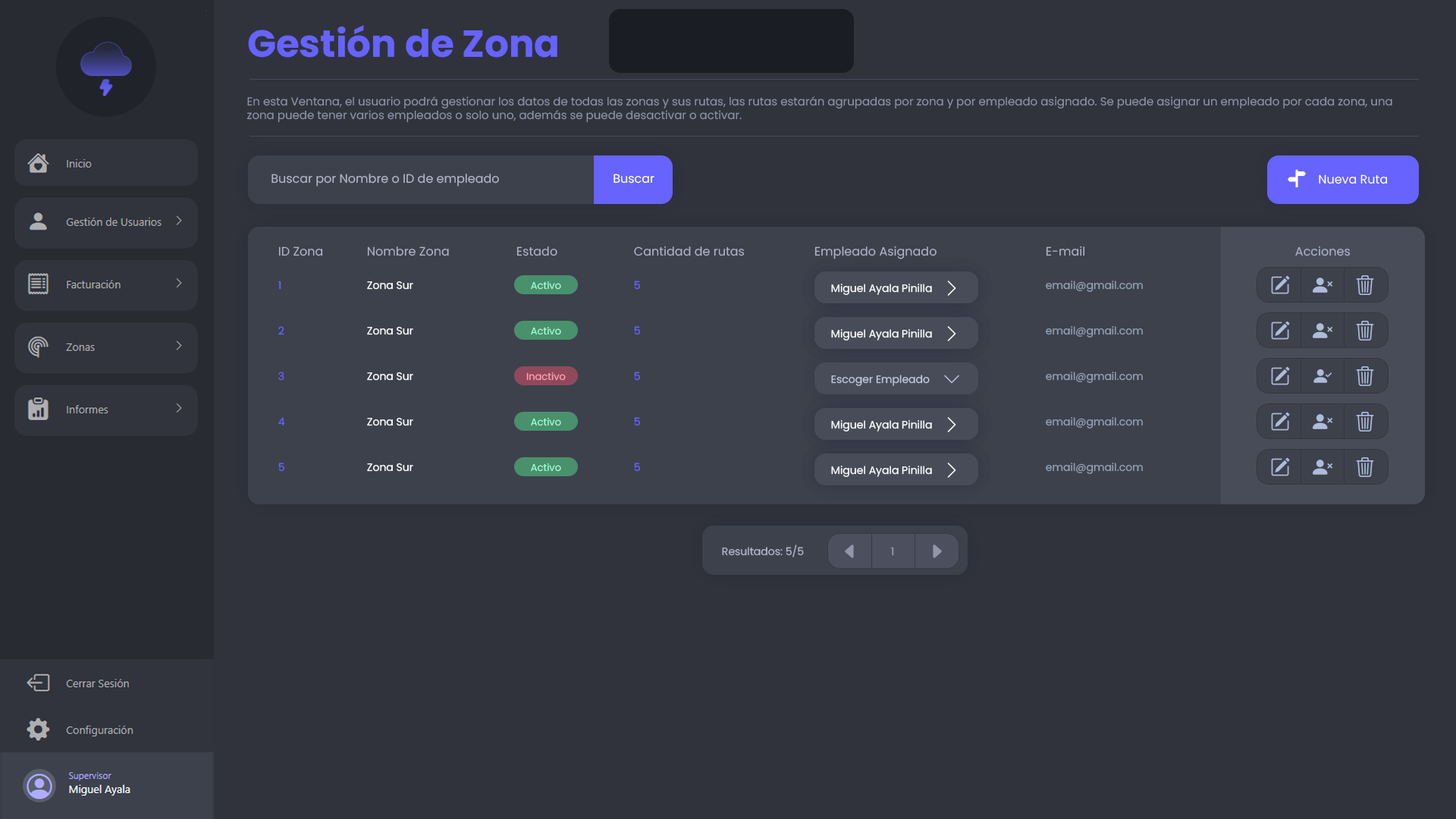
<style>
.page{position:relative;width:1456px;height:819px;background:#30333c}
.page>*{position:absolute;margin:0}
.t1{font:37.9px "Poppins-Bold";color:#6663fe}
.t2{font:11.4px "Poppins-Regular";color:#8c92a6}
.t3{font:12.1px "Poppins-Regular";color:#aeb5c8}
.t4{font:12.1px "Poppins-Regular";color:#ffffff}
.t5{font:12.1px "Poppins-Regular";color:#bcc9db}
.t6{font:10.6px "Poppins-Regular";color:#6663fe}
.t7{font:10.6px "Poppins-Regular";color:#ffffff}
.t8{font:9.9px "Poppins-Regular";color:#9fffcf}
.t9{font:10.6px "Poppins-Regular";color:#92a0b4}
.t10{font:9.9px "Poppins-Regular";color:#ff9fb3}
.t11{font:10.6px "Poppins-Regular";color:#bcc9db}
.t12{font:10.6px "Poppins-Regular";color:#aeb5c8}
.t13{font:10.6px "Poppins-Regular";color:#959bac}
</style>
<div class="page">
<p class="t1" style="left:248px;top:25px;width:309px;height:33px">Gestión de Zona</p>
<p class="t2" style="left:246px;top:96px;width:1146px;height:27px">En esta Ventana, el usuario podrá gestionar los datos de todas las zonas y sus rutas, las rutas estarán agrupadas por zona y por empleado asignado. Se puede asignar un empleado por cada zona, una <br>zona puede tener varios empleados o solo uno, además se puede desactivar o activar.</p>
<p class="t3" style="left:271px;top:174px;width:228px;height:13px">Buscar por Nombre o ID de empleado</p>
<p class="t4" style="left:613px;top:174px;width:41px;height:10px">Buscar</p>
<p class="t4" style="left:1319px;top:174px;width:69px;height:10px">Nueva Ruta</p>
<p class="t5" style="left:634px;top:246px;width:111px;height:10px">Cantidad de rutas</p>
<p class="t5" style="left:814px;top:246px;width:123px;height:13px">Empleado Asignado</p>
<p class="t5" style="left:1046px;top:246px;width:39px;height:10px">E-mail</p>
<p class="t5" style="left:1295px;top:246px;width:56px;height:10px">Acciones</p>
<p class="t5" style="left:278px;top:246px;width:45px;height:10px">ID Zona</p>
<p class="t5" style="left:367px;top:246px;width:82px;height:10px">Nombre Zona</p>
<p class="t5" style="left:516px;top:246px;width:41px;height:10px">Estado</p>
<p class="t6" style="left:278px;top:281px;width:3px;height:9px">1</p>
<p class="t7" style="left:367px;top:281px;width:46px;height:9px">Zona Sur</p>
<p class="t8" style="left:531px;top:281px;width:30px;height:9px">Activo</p>
<p class="t6" style="left:634px;top:281px;width:6px;height:9px">5</p>
<p class="t9" style="left:1046px;top:281px;width:97px;height:11px">email@gmail.com</p>
<p class="t7" style="left:831px;top:284px;width:101px;height:11px">Miguel Ayala Pinilla</p>
<p class="t6" style="left:278px;top:326px;width:6px;height:9px">2</p>
<p class="t7" style="left:367px;top:326px;width:46px;height:9px">Zona Sur</p>
<p class="t8" style="left:531px;top:327px;width:30px;height:8px">Activo</p>
<p class="t6" style="left:634px;top:326px;width:6px;height:9px">5</p>
<p class="t7" style="left:831px;top:329px;width:101px;height:11px">Miguel Ayala Pinilla</p>
<p class="t9" style="left:1046px;top:326px;width:97px;height:11px">email@gmail.com</p>
<p class="t6" style="left:278px;top:372px;width:6px;height:9px">3</p>
<p class="t7" style="left:367px;top:372px;width:46px;height:9px">Zona Sur</p>
<p class="t10" style="left:526px;top:372px;width:40px;height:9px">Inactivo</p>
<p class="t6" style="left:634px;top:372px;width:6px;height:9px">5</p>
<p class="t11" style="left:831px;top:375px;width:99px;height:11px">Escoger Empleado</p>
<p class="t9" style="left:1046px;top:372px;width:97px;height:11px">email@gmail.com</p>
<p class="t6" style="left:278px;top:417px;width:7px;height:9px">4</p>
<p class="t7" style="left:367px;top:417px;width:46px;height:9px">Zona Sur</p>
<p class="t8" style="left:531px;top:418px;width:30px;height:8px">Activo</p>
<p class="t6" style="left:634px;top:417px;width:6px;height:9px">5</p>
<p class="t7" style="left:831px;top:420px;width:101px;height:11px">Miguel Ayala Pinilla</p>
<p class="t9" style="left:1046px;top:417px;width:97px;height:11px">email@gmail.com</p>
<p class="t6" style="left:278px;top:463px;width:6px;height:9px">5</p>
<p class="t7" style="left:367px;top:463px;width:46px;height:9px">Zona Sur</p>
<p class="t8" style="left:531px;top:463px;width:30px;height:9px">Activo</p>
<p class="t6" style="left:634px;top:463px;width:6px;height:9px">5</p>
<p class="t7" style="left:831px;top:466px;width:101px;height:11px">Miguel Ayala Pinilla</p>
<p class="t9" style="left:1046px;top:463px;width:97px;height:11px">email@gmail.com</p>
<p class="t12" style="left:722px;top:544px;width:82px;height:13px">Resultados: 5/5</p>
<p class="t13" style="left:891px;top:547px;width:3px;height:9px">1</p>
</div>
